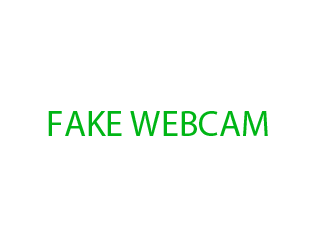
<style>
.page{position:relative;width:320px;height:240px;background:#ffffff}
.page>*{position:absolute;margin:0}
.t1{font:36px "MyriadPro-Regular";color:#00b515}
</style>
<div class="page">
<p class="t1" style="left:48px;top:111px;width:220px;height:25px">FAKE WEBCAM</p>
</div>
